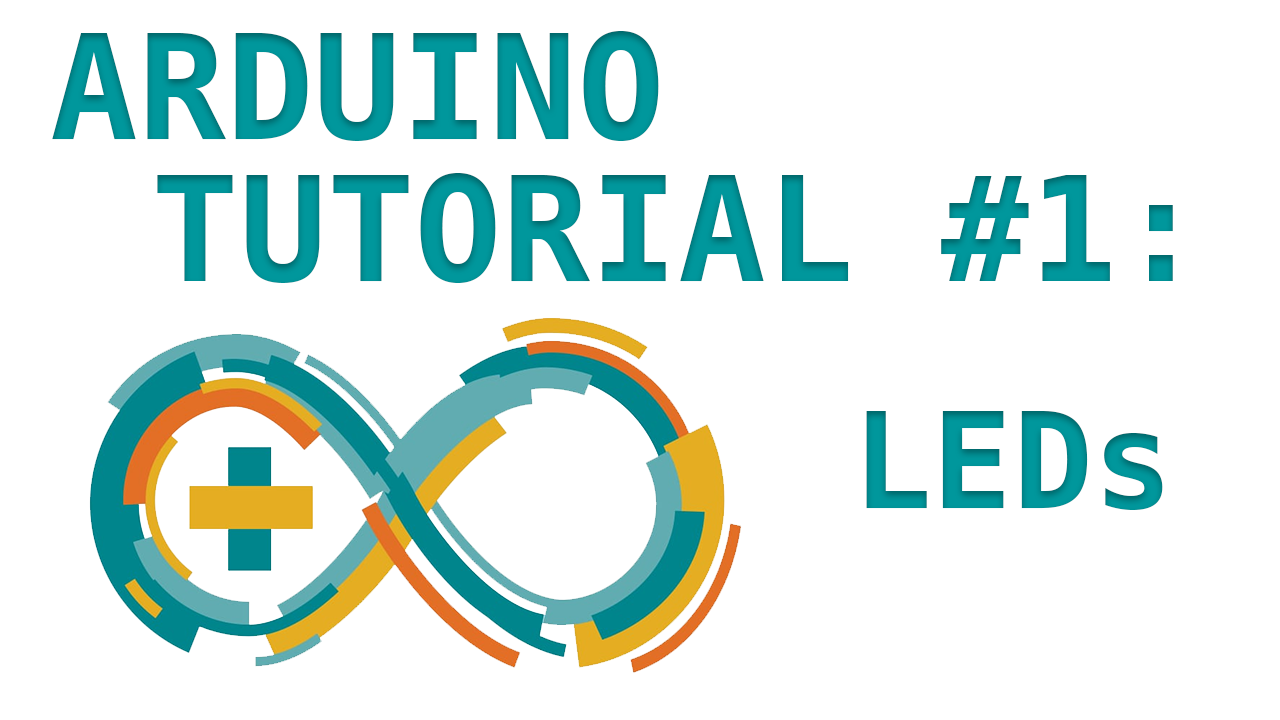
<style>
.page{position:relative;width:1280px;height:720px;background:#ffffff}
.page>*{position:absolute;margin:0}
.t1{font:145.8px "Menlo-Bold";color:#00979c}
.t2{font:133.3px "Menlo-Bold";color:#00979c}
</style>
<div class="page">
<p class="t1" style="left:52px;top:31px;width:607px;height:110px">ARDUINO</p>
<p class="t1" style="left:157px;top:173px;width:1016px;height:110px">TUTORIAL #1:</p>
<p class="t2" style="left:866px;top:411px;width:297px;height:99px">LEDs</p>
</div>
